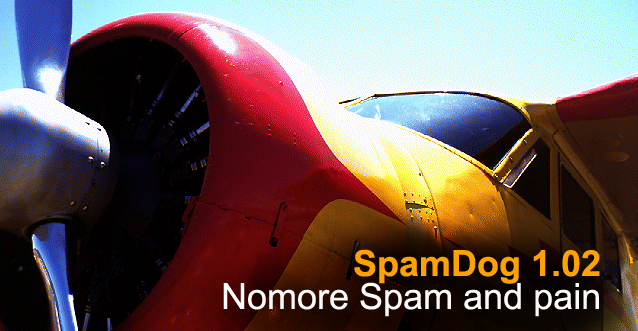
<style>
.page{position:relative;width:638px;height:331px}
.page>*{position:absolute;margin:0}
.t1{font:36px "Arial-BoldMT";color:#fea203}
.t2{font:36px "ArialMT";color:#fcfbfa}
</style>
<div class="page">
<p class="t1" style="left:354px;top:249px;width:246px;height:35px">SpamDog 1.02</p>
<p class="t2" style="left:223px;top:282px;width:376px;height:35px">Nomore Spam and pain</p>
</div>
